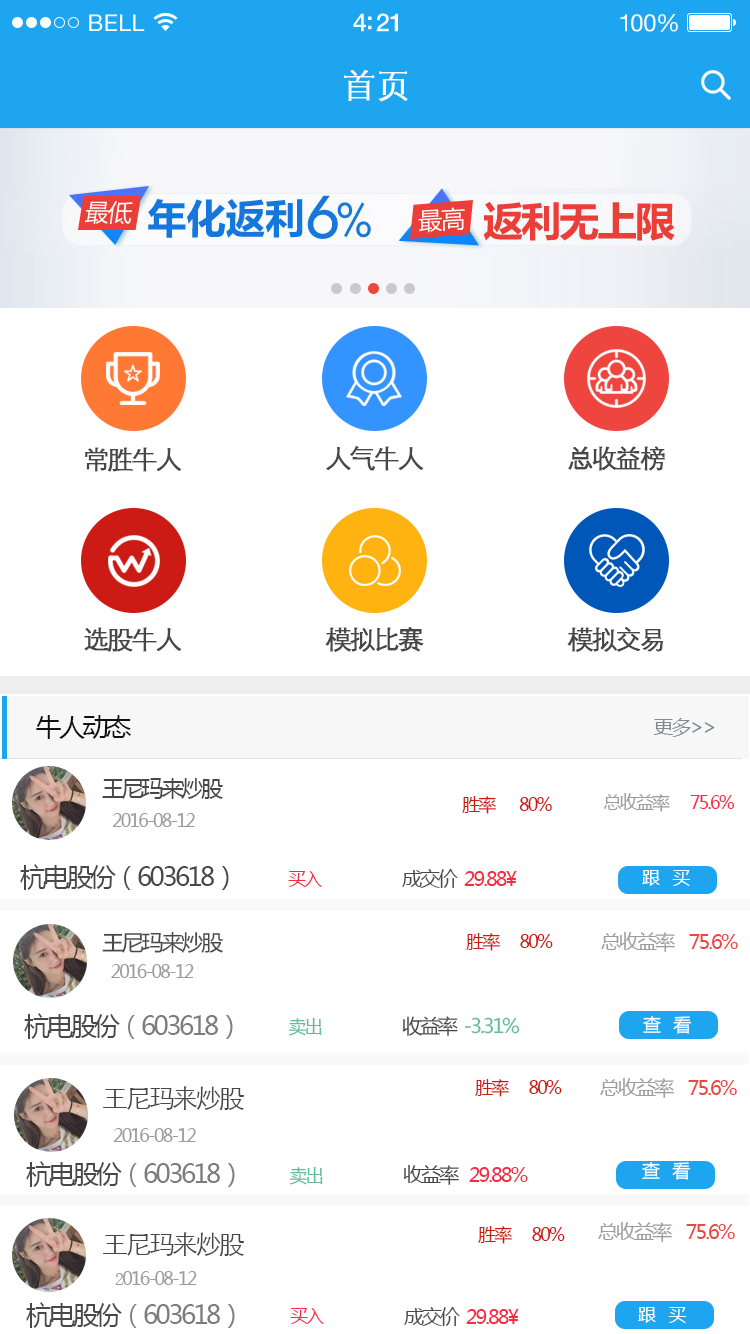
<style>
.page{position:relative;width:750px;height:1334px;background:#ffffff}
.page>*{position:absolute;margin:0}
.t1{font:23px "HelveticaNeue";letter-spacing:0.02em;color:#ffffff}
.t2{font:24px "HelveticaNeue";letter-spacing:-0.02em;color:#ffffff}
.t3{font:33px "STXihei";color:#ffffff;font-weight:bold}
.t4{font:26px "STXihei";letter-spacing:-0.1em;color:#474747;font-weight:bold}
.t5{font:26px "MicrosoftYaHei";letter-spacing:-0.1em;color:#0f1010}
.t6{font:20px "MicrosoftYaHei";letter-spacing:-0.1em;color:#848a8d}
.t7{font:22px "MicrosoftYaHei";letter-spacing:-0.1em;color:#484848}
.t8{font:18px "MicrosoftYaHei";letter-spacing:-0.1em;color:#cc1b15}
.t9{font:18px "MicrosoftYaHei";letter-spacing:-0.1em;color:#f42c44}
.t10{font:18px "MicrosoftYaHei";letter-spacing:-0.1em;color:#9c9c9c}
.t11{font:26px "MicrosoftYaHei";letter-spacing:-0.1em;color:#484848}
.t12{font:20px "MicrosoftYaHei";letter-spacing:-0.1em;color:#f42c44}
.t13{font:20px "MicrosoftYaHei";letter-spacing:-0.1em;color:#484848}
.t14{font:18px "MicrosoftYaHei";letter-spacing:-0.1em;color:#ffffff}
.t15{font:21.6px "MicrosoftYaHei";letter-spacing:-0.1em;color:#484848}
.t16{font:20px "MicrosoftYaHei";letter-spacing:-0.1em;color:#ee453f}
.t17{font:20px "MicrosoftYaHei";letter-spacing:-0.1em;color:#9c9c9c}
.t18{font:26px "MicrosoftYaHei";letter-spacing:-0.1em;color:#7c7c7c}
.t19{font:18px "MicrosoftYaHei";letter-spacing:-0.1em;color:#63bd9e}
.t20{font:19.8px "MicrosoftYaHei";letter-spacing:-0.1em;color:#63bd9e}
.t21{font:19.8px "MicrosoftYaHei";letter-spacing:-0.1em;color:#484848}
.t22{font:26px "STXihei";letter-spacing:-0.1em;color:#484848}
.t23{font:18px "SimSun";letter-spacing:-0.1em;color:#9c9c9c}
</style>
<div class="page">
<p class="t1" style="left:89px;top:14px;width:56px;height:17px">BELL</p>
<p class="t2" style="left:620px;top:14px;width:58px;height:18px">100%</p>
<p class="t3" style="left:344px;top:70px;width:64px;height:32px">首页</p>
<p class="t4" style="left:85px;top:447px;width:97px;height:25px">常胜牛人</p>
<p class="t4" style="left:326px;top:446px;width:98px;height:25px">人气牛人</p>
<p class="t4" style="left:568px;top:446px;width:97px;height:25px">总收益榜</p>
<p class="t4" style="left:84px;top:627px;width:98px;height:25px">选股牛人</p>
<p class="t4" style="left:325px;top:627px;width:99px;height:25px">模拟比赛</p>
<p class="t4" style="left:567px;top:627px;width:96px;height:25px">模拟交易</p>
<p class="t5" style="left:36px;top:715px;width:95px;height:24px">牛人动态</p>
<p class="t6" style="left:653px;top:718px;width:62px;height:19px">更多&gt;&gt;</p>
<p class="t7" style="left:102px;top:778px;width:121px;height:21px">王尼玛来炒股</p>
<p class="t8" style="left:462px;top:796px;width:90px;height:18px">胜率       80%</p>
<p class="t9" style="left:603px;top:793px;width:132px;height:19px"><span class="t10">总收益率   </span>75.6%</p>
<p class="t10" style="left:112px;top:813px;width:83px;height:14px">2016-08-12</p>
<p class="t11" style="left:20px;top:864px;width:209px;height:26px">杭电股份（603618）</p>
<p class="t12" style="left:402px;top:869px;width:115px;height:19px"><span class="t13">成交价  </span>29.88¥</p>
<p class="t14" style="left:642px;top:870px;width:48px;height:16px">跟    买</p>
<p class="t9" style="left:288px;top:871px;width:34px;height:16px">买入</p>
<p class="t15" style="left:102px;top:931px;width:121px;height:23px">王尼玛来炒股</p>
<p class="t8" style="left:466px;top:933px;width:87px;height:18px">胜率      80%</p>
<p class="t16" style="left:601px;top:932px;width:137px;height:20px"><span class="t17">总收益率    </span>75.6%</p>
<p class="t10" style="left:111px;top:964px;width:83px;height:14px">2016-08-12</p>
<p class="t18" style="left:24px;top:1013px;width:209px;height:26px"><span class="t11">杭电股份</span>（603618）</p>
<p class="t19" style="left:288px;top:1018px;width:34px;height:18px">卖出</p>
<p class="t20" style="left:402px;top:1016px;width:118px;height:20px"><span class="t21">收益率  </span>-3.31%</p>
<p class="t14" style="left:643px;top:1016px;width:49px;height:18px">查    看</p>
<p class="t22" style="left:103px;top:1086px;width:141px;height:24px">王尼玛来炒股</p>
<p class="t8" style="left:475px;top:1079px;width:87px;height:18px">胜率      80%</p>
<p class="t16" style="left:600px;top:1078px;width:137px;height:20px"><span class="t17">总收益率    </span>75.6%</p>
<p class="t10" style="left:113px;top:1128px;width:83px;height:14px">2016-08-12</p>
<p class="t18" style="left:26px;top:1161px;width:209px;height:26px"><span class="t11">杭电股份</span>（603618）</p>
<p class="t19" style="left:289px;top:1167px;width:34px;height:18px">卖出</p>
<p class="t12" style="left:403px;top:1165px;width:125px;height:20px"><span class="t13">收益率   </span>29.88%</p>
<p class="t14" style="left:642px;top:1162px;width:49px;height:18px">查    看</p>
<p class="t8" style="left:478px;top:1226px;width:87px;height:18px">胜率      80%</p>
<p class="t16" style="left:598px;top:1222px;width:137px;height:20px"><span class="t17">总收益率    </span>75.6%</p>
<p class="t22" style="left:103px;top:1232px;width:141px;height:24px">王尼玛来炒股</p>
<p class="t10" style="left:115px;top:1271px;width:82px;height:14px"><span class="t23">2</span>016-08-12</p>
<p class="t18" style="left:26px;top:1302px;width:209px;height:26px"><span class="t11">杭电股份</span>（603618）</p>
<p class="t9" style="left:290px;top:1308px;width:34px;height:16px">买入</p>
<p class="t12" style="left:404px;top:1307px;width:115px;height:19px"><span class="t13">成交价  </span>29.88¥</p>
<p class="t14" style="left:638px;top:1307px;width:48px;height:16px">跟    买</p>
</div>
